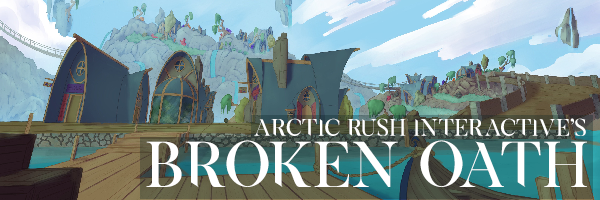
<style>
.page{position:relative;width:600px;height:200px}
.page>*{position:absolute;margin:0}
.t1{font:22.9px "ExodusDemo-Sa";color:#ffffff}
.t2{font:62px "ExodusDemo-Sa";color:#ffffff}
</style>
<div class="page">
<p class="t1" style="left:254px;top:118px;width:332px;height:19px">ARCTIC RUSH INTERACTIVE’s</p>
<p class="t2" style="left:146px;top:140px;width:441px;height:47px">BROKEN OATH</p>
</div>
